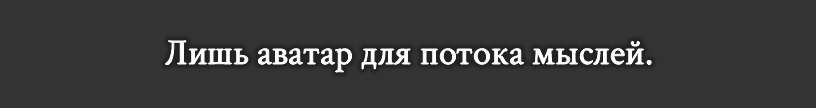
<style>
.page{position:relative;width:816px;height:108px;background:#333333}
.page>*{position:absolute;margin:0}
.t1{font:36px "CrimsonText-Regular";color:#ffffff}
</style>
<div class="page">
<p class="t1" style="left:165px;top:40px;width:487px;height:32px">Лишь аватар для потока мыслей.</p>
</div>
